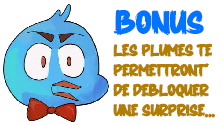
<style>
.page{position:relative;width:222px;height:125px;background:#ffffff}
.page>*{position:absolute;margin:0}
.t1{font:33.3px "THORN";color:#0074ff}
.t2{font:16.7px "THORN";color:#b27e00}
</style>
<div class="page">
<p class="t1" style="left:113px;top:9px;width:91px;height:27px">Bonus</p>
<p class="t2" style="left:113px;top:43px;width:102px;height:75px">les plumes te<br>permettront*<br>de debloquer<br>une surprise...</p>
</div>
